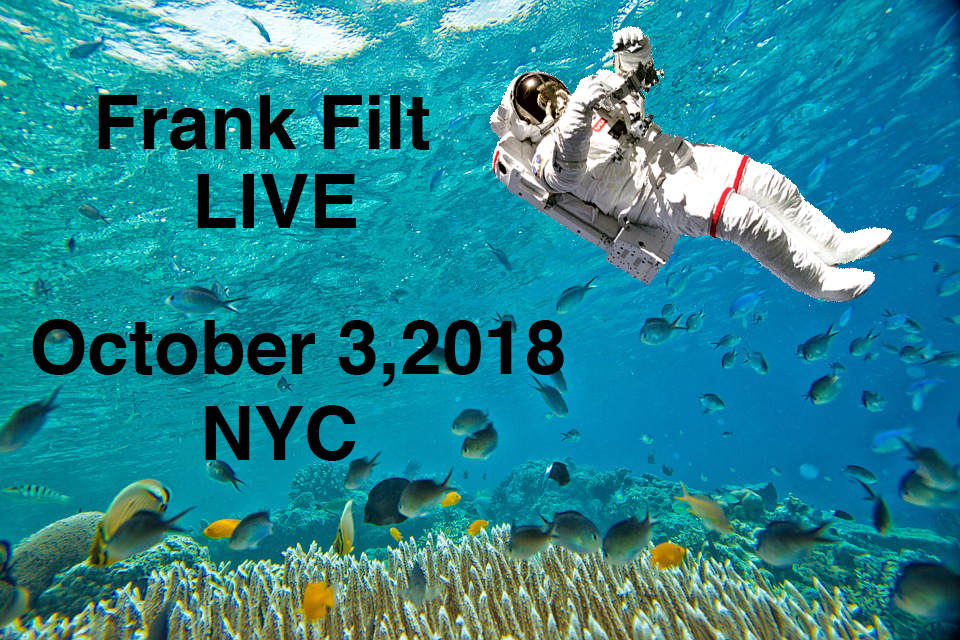
<style>
.page{position:relative;width:960px;height:640px}
.page>*{position:absolute;margin:0}
.t1{font:75px "Helvetica-Bold";color:#000000}
</style>
<div class="page">
<p class="t1" style="left:98px;top:95px;width:332px;height:55px">Frank Filt</p>
<p class="t1" style="left:197px;top:174px;width:159px;height:54px">LIVE</p>
<p class="t1" style="left:32px;top:319px;width:532px;height:68px">October 3,2018</p>
<p class="t1" style="left:205px;top:405px;width:151px;height:56px">NYC</p>
</div>
